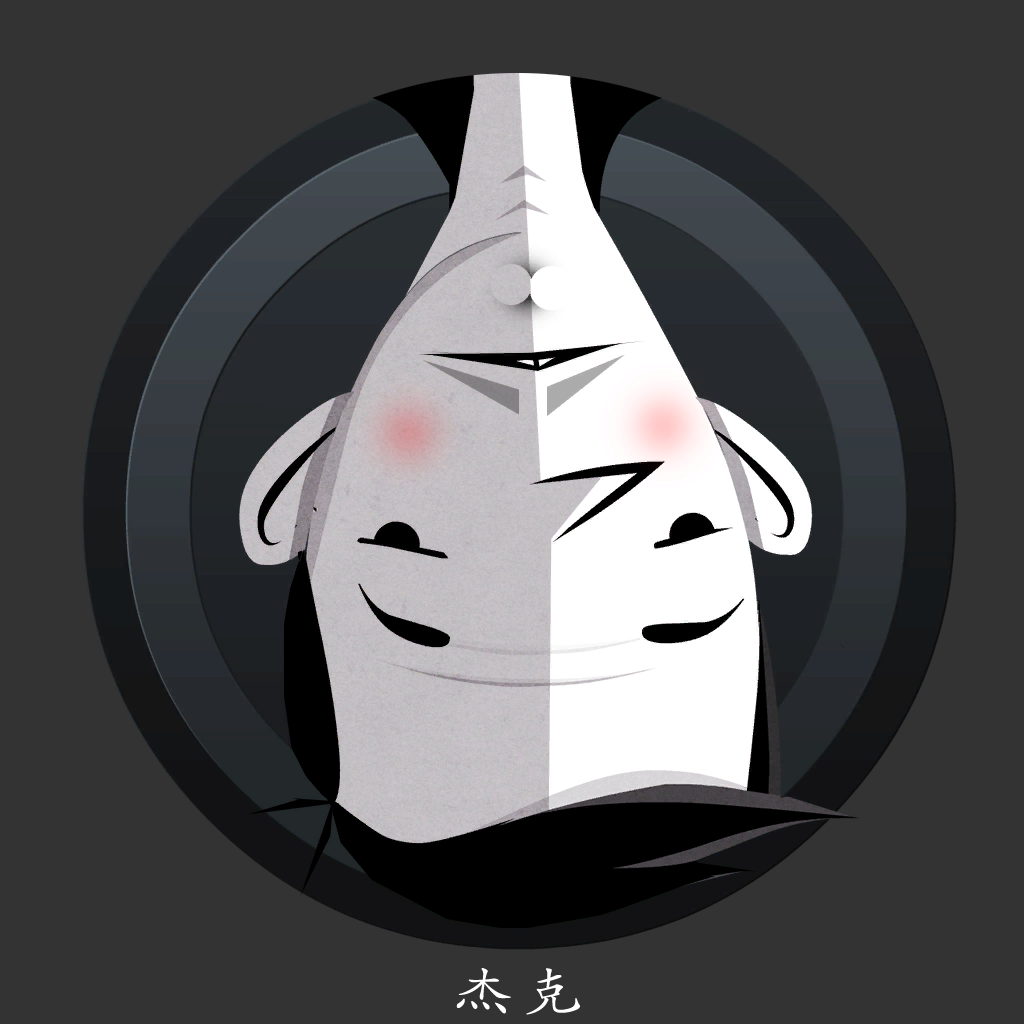
<style>
.page{position:relative;width:1024px;height:1024px;background:#333333}
.page>*{position:absolute;margin:0}
.t1{font:53.3px "STKaiti";letter-spacing:0.1em;color:#ffffff}
</style>
<div class="page">
<p class="t1" style="left:456px;top:968px;width:124px;height:47px">杰克</p>
</div>
